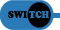
<style>
.page{position:relative;width:60px;height:30px;background:#2a7ab7}
.page>*{position:absolute;margin:0}
.t1{font:9.9px "CooperBlack";color:#000000;scale:0.91 1}
.t2{font:9.9px "CooperBlack";color:#2a7ab7;scale:0.91 1}
</style>
<div class="page">
<p class="t1" style="left:8px;top:11px;width:19px;height:7px">SWI</p>
<p class="t2" style="left:29px;top:11px;width:20px;height:7px">TCH</p>
</div>
